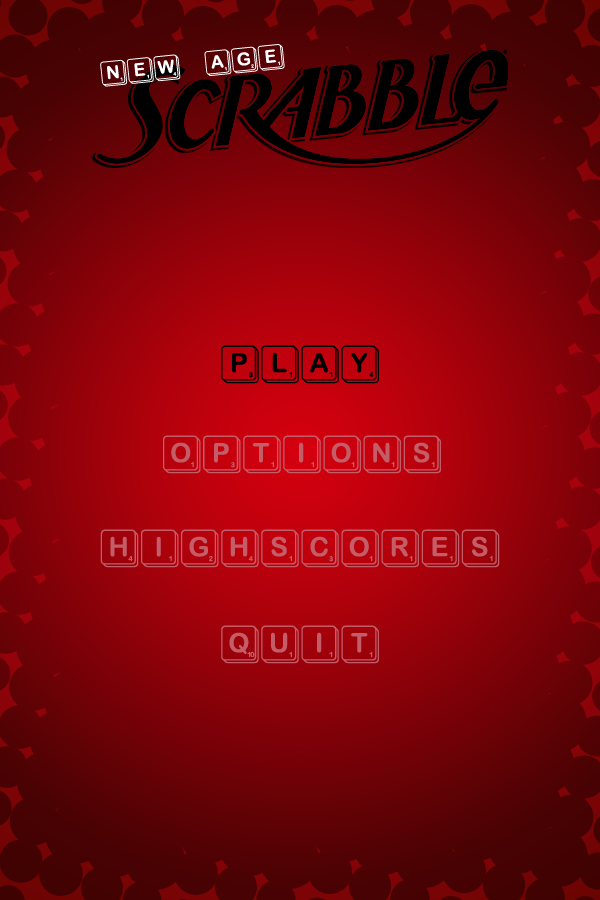
<style>
.page{position:relative;width:600px;height:900px}
.page>*{position:absolute;margin:0}
.t1{font:72px "ScrambleMixed";color:#000000}
.t2{font:72px "ScrambleMixed";color:#c35d68}
</style>
<div class="page">
<p class="t1" style="left:221px;top:345px;width:158px;height:39px">play</p>
<p class="t2" style="left:163px;top:435px;width:278px;height:39px">options</p>
<p class="t2" style="left:100px;top:529px;width:400px;height:39px">highscores</p>
<p class="t2" style="left:221px;top:625px;width:158px;height:39px">quit</p>
</div>
